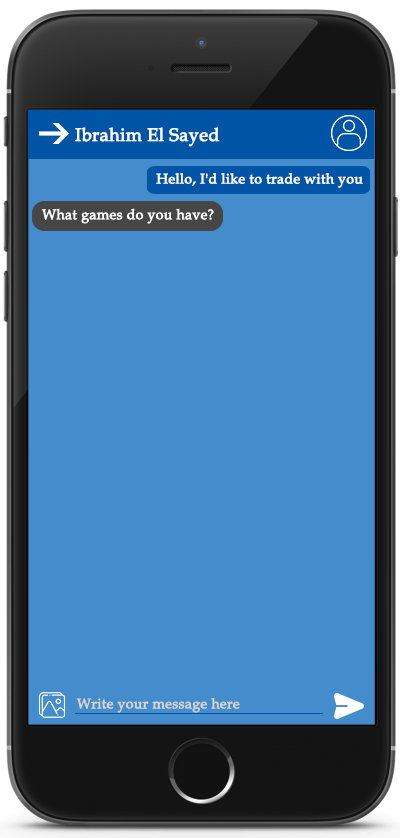
<style>
.page{position:relative;width:400px;height:838px;background:#448ccb}
.page>*{position:absolute;margin:0}
.t1{font:18px "BookAntiqua";color:#ffffff;font-weight:bold}
.t2{font:14px "BookAntiqua";color:#ffffff;font-weight:bold}
.t3{font:14px "BookAntiqua";color:#d4d4d4;font-weight:bold}
</style>
<div class="page">
<p class="t1" style="left:75px;top:127px;width:145px;height:20px">Ibrahim El Sayed</p>
<p class="t2" style="left:156px;top:173px;width:207px;height:15px">Hello, I'd like to trade with you</p>
<p class="t2" style="left:42px;top:208px;width:172px;height:16px">What games do you have?</p>
<p class="t3" style="left:76px;top:697px;width:164px;height:16px">Write your message here</p>
</div>
